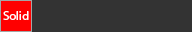
<style>
.page{position:relative;width:192px;height:32px;background:#333333}
.page>*{position:absolute;margin:0}
.t1{font:12.5px "MyriadPro-Regular";color:#ffffff}
</style>
<div class="page">
<p class="t1" style="left:3px;top:11px;width:26px;height:9px">Solid</p>
</div>
